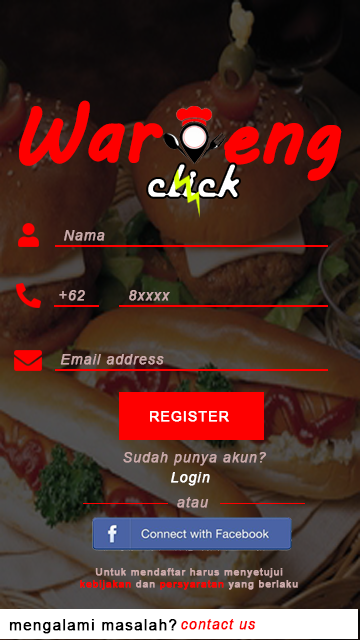
<style>
.page{position:relative;width:360px;height:640px}
.page>*{position:absolute;margin:0}
.t1{font:75.4px "MVBoli";color:#fe0000;font-weight:bold}
.t2{font:50.3px "HarlowSolid";font-weight:bold}
.t3{font:13.9px "Arial-ItalicMT";letter-spacing:0.06em;color:#caaaaa;font-weight:bold}
.t4{font:13.9px "ArialMT";letter-spacing:0.06em;color:#ffffff;font-weight:bold}
.t5{font:13.9px "Arial-ItalicMT";letter-spacing:0.06em;color:#ffffff;font-weight:bold}
.t6{font:10.4px "ArialMT";letter-spacing:0.06em;color:#ccaaaa;font-weight:bold}
.t7{font:10.4px "ArialMT";letter-spacing:0.06em;color:#fe0000;font-weight:bold}
.t8{font:15.3px "ArialMT";letter-spacing:0.06em;color:#000000;font-weight:bold}
.t9{font:13.9px "Arial-ItalicMT";letter-spacing:0.06em;color:#fe0000;font-weight:bold}
</style>
<div class="page">
<p class="t1" style="left:19px;top:100px;width:144px;height:66px">War</p>
<p class="t1" style="left:224px;top:122px;width:118px;height:59px">eng</p>
<p class="t2" style="left:146px;top:162px;width:95px;height:37px">click</p>
<p class="t3" style="left:64px;top:230px;width:41px;height:11px">Nama</p>
<p class="t3" style="left:59px;top:290px;width:26px;height:11px">+62</p>
<p class="t3" style="left:129px;top:290px;width:41px;height:11px">8xxxx</p>
<p class="t3" style="left:60px;top:354px;width:104px;height:11px">Email address</p>
<p class="t4" style="left:150px;top:411px;width:79px;height:11px">REGISTER</p>
<p class="t3" style="left:123px;top:452px;width:144px;height:14px">Sudah punya akun?</p>
<p class="t5" style="left:171px;top:472px;width:39px;height:14px">Login</p>
<p class="t3" style="left:177px;top:497px;width:32px;height:11px">atau</p>
<p class="t6" style="left:80px;top:568px;width:218px;height:22px;text-align:center">Untuk mendaftar harus menyetujui<br><span class="t7">kebijakan </span>dan <span class="t7">persyaratan </span>yang berlaku</p>
<p class="t8" style="left:9px;top:619px;width:168px;height:15px">mengalami masalah?</p>
<p class="t9" style="left:181px;top:619px;width:75px;height:11px">contact us</p>
</div>
